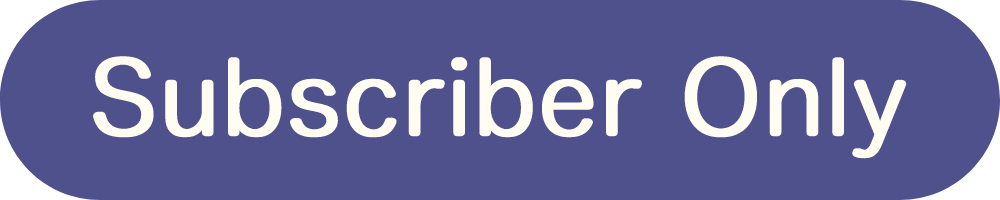
<style>
.page{position:relative;width:1000px;height:200px;background:#4f518c}
.page>*{position:absolute;margin:0}
.t1{font:100px "HiraMaruProN-W4";color:#fffcf2;font-weight:bold}
</style>
<div class="page">
<p class="t1" style="left:93px;top:56px;width:814px;height:103px">Subscriber Only</p>
</div>
